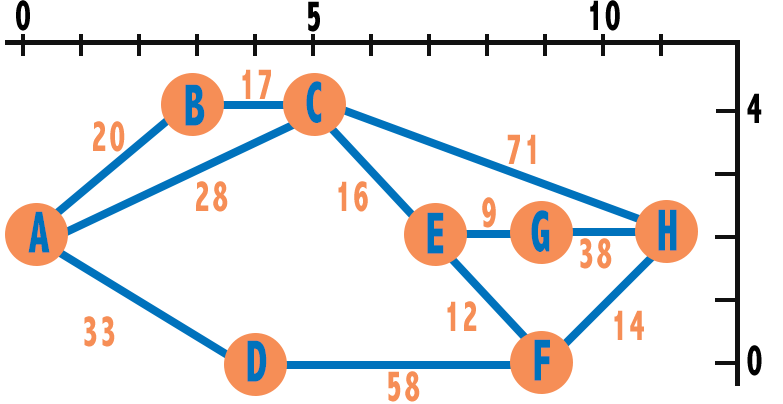
<style>
.page{position:relative;width:783px;height:404px;background:#ffffff}
.page>*{position:absolute;margin:0}
.t1{font:45px "AbadiMT-CondensedExtraBold";letter-spacing:0.075em;color:#000000;scale:0.68 1}
.t2{font:45px "AbadiMT-CondensedExtraBold";letter-spacing:0.075em;color:#f68e56;scale:0.68 1}
.t3{font:60px "AbadiMT-CondensedExtraBold";letter-spacing:0.075em;color:#0072bc;scale:0.68 1}
</style>
<div class="page">
<p class="t1" style="left:16px;top:0px;width:14px;height:31px">0</p>
<p class="t1" style="left:308px;top:1px;width:12px;height:31px">5</p>
<p class="t1" style="left:590px;top:0px;width:30px;height:31px">10</p>
<p class="t2" style="left:242px;top:69px;width:29px;height:30px">17</p>
<p class="t3" style="left:185px;top:84px;width:20px;height:42px">B</p>
<p class="t3" style="left:306px;top:81px;width:16px;height:42px">C</p>
<p class="t1" style="left:747px;top:93px;width:15px;height:30px">4</p>
<p class="t2" style="left:93px;top:121px;width:32px;height:31px">20</p>
<p class="t2" style="left:507px;top:134px;width:29px;height:30px">71</p>
<p class="t2" style="left:196px;top:181px;width:32px;height:31px">28</p>
<p class="t2" style="left:338px;top:181px;width:30px;height:31px">16</p>
<p class="t2" style="left:482px;top:197px;width:14px;height:31px">9</p>
<p class="t3" style="left:658px;top:209px;width:19px;height:42px">H</p>
<p class="t3" style="left:28px;top:211px;width:22px;height:42px">A</p>
<p class="t3" style="left:427px;top:212px;width:17px;height:42px">E</p>
<p class="t3" style="left:531px;top:210px;width:19px;height:42px">G</p>
<p class="t2" style="left:580px;top:238px;width:32px;height:31px">38</p>
<p class="t2" style="left:447px;top:301px;width:30px;height:30px">12</p>
<p class="t2" style="left:84px;top:316px;width:31px;height:31px">33</p>
<p class="t2" style="left:614px;top:310px;width:30px;height:30px">14</p>
<p class="t3" style="left:247px;top:340px;width:20px;height:42px">D</p>
<p class="t3" style="left:534px;top:339px;width:16px;height:42px">F</p>
<p class="t1" style="left:747px;top:345px;width:15px;height:31px">0</p>
<p class="t2" style="left:388px;top:371px;width:32px;height:31px">58</p>
</div>
